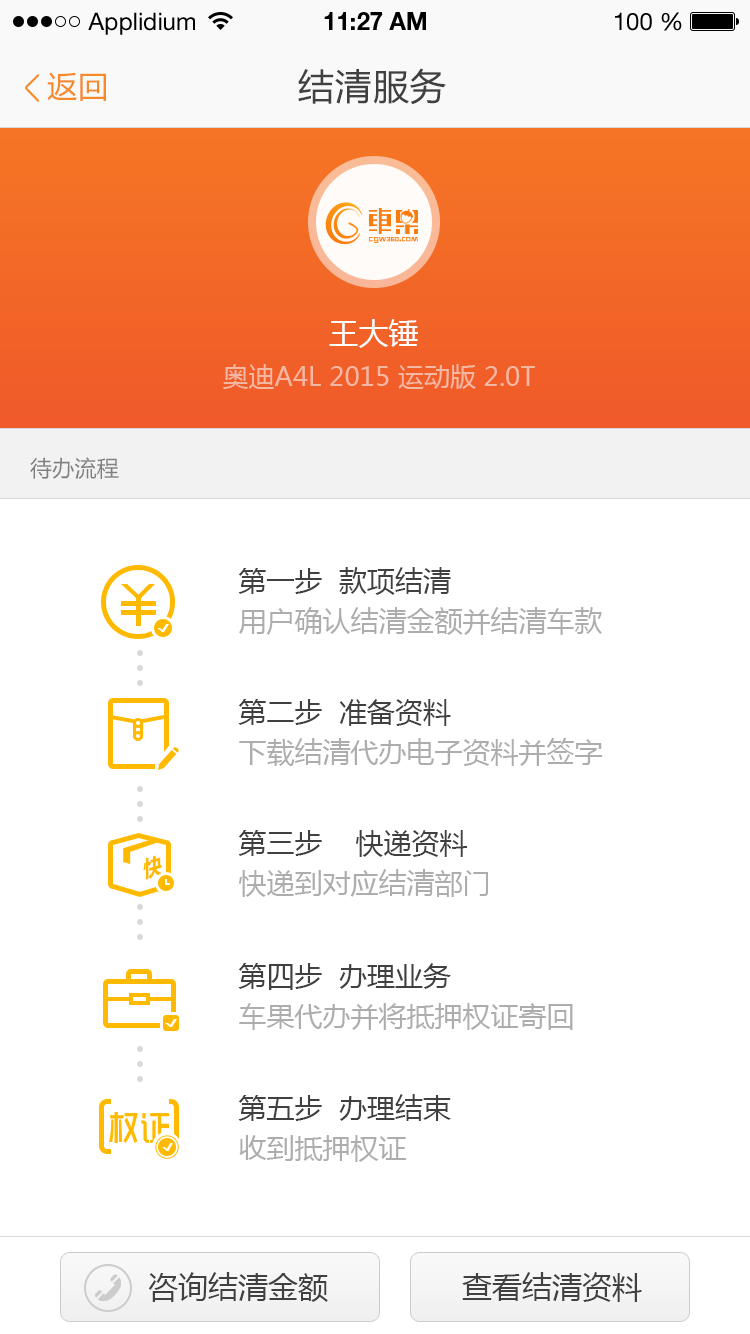
<style>
.page{position:relative;width:750px;height:1334px;background:#ffffff}
.page>*{position:absolute;margin:0}
.t1{font:24px "HelveticaNeueLTStd-Roman";color:#000000}
.t2{font:24px "HelveticaNeueLTStd-Bd";color:#000000}
.t3{font:30px "MicrosoftYaHei";letter-spacing:0.038em;color:#f68929}
.t4{font:36px "MicrosoftYaHei";letter-spacing:0.038em;color:#404040}
.t5{font:30px "MicrosoftYaHei";color:#ffffff}
.t6{font:26px "MicrosoftYaHei";color:#f4b7a1}
.t7{font:22px "MicrosoftYaHei";letter-spacing:0.01em;color:#808080}
.t8{font:28px/60px "MicrosoftYaHei";color:#adadad}
.t9{font:28px/60px "MicrosoftYaHei";color:#404040}
.t10{font:23.4px "FZLTDHK--GBK1-0";color:#ffba00;scale:0.84 1}
.t11{font:30px "MicrosoftYaHei";color:#404040}
</style>
<div class="page">
<p class="t1" style="left:88px;top:12px;width:107px;height:23px">Applidium</p>
<p class="t2" style="left:324px;top:12px;width:102px;height:18px">11:27 AM</p>
<p class="t1" style="left:615px;top:12px;width:67px;height:19px">100 %</p>
<p class="t3" style="left:47px;top:72px;width:59px;height:29px">返回</p>
<p class="t4" style="left:298px;top:68px;width:148px;height:37px">结清服务</p>
<p class="t5" style="left:329px;top:319px;width:89px;height:29px">王大锤</p>
<p class="t6" style="left:223px;top:364px;width:312px;height:25px">奥迪A4L 2015 运动版 2.0T</p>
<p class="t7" style="left:30px;top:457px;width:89px;height:22px">待办流程</p>
<p class="t8" style="left:238px;top:567px;width:364px;height:68px"><span class="t9">第一步  款项结清<br></span>用户确认结清金额并结清车款</p>
<p class="t8" style="left:238px;top:699px;width:365px;height:67px"><span class="t9">第二步  准备资料<br></span>下载结清代办电子资料并签字</p>
<p class="t9" style="left:238px;top:830px;width:250px;height:67px">第三步    快递资料<br><span class="t8">快递到对应结清部门</span></p>
<p class="t10" style="left:143px;top:855px;width:19px;height:25px;rotate:-15deg">快</p>
<p class="t8" style="left:238px;top:963px;width:335px;height:67px"><span class="t9">第四步  办理业务<br></span>车果代办并将抵押权证寄回</p>
<p class="t9" style="left:238px;top:1094px;width:213px;height:68px">第五步  办理结束<br><span class="t8">收到抵押权证</span></p>
<p class="t11" style="left:148px;top:1272px;width:180px;height:30px">咨询结清金额</p>
<p class="t11" style="left:462px;top:1272px;width:180px;height:30px">查看结清资料</p>
</div>
